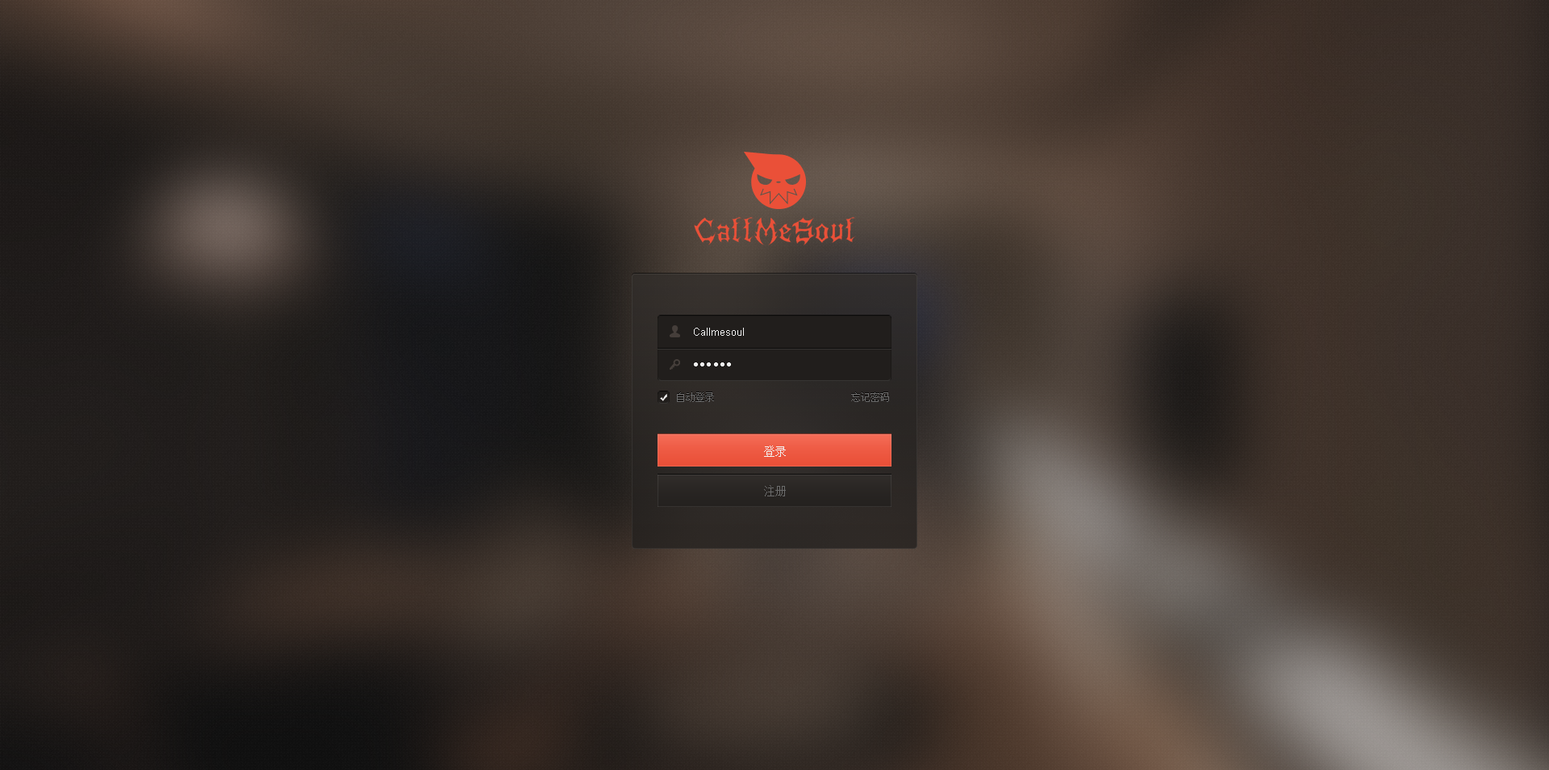
<style>
.page{position:relative;width:1549px;height:770px}
.page>*{position:absolute;margin:0}
.t1{font:10.7px "ArialMT";color:#f2f2f2}
.t2{font:9.7px "ArialMT";letter-spacing:0.1em;color:#f2f2f2}
.t3{font:9.7px "SimSun";color:#6b6b6b}
.t4{font:11.3px "SimSun";color:#f2f2f2}
.t5{font:11.3px "SimSun";color:#6b6b6b}
</style>
<div class="page">
<p class="t1" style="left:694px;top:328px;width:50px;height:8px">Callmesoul</p>
<p class="t2" style="left:694px;top:362px;width:37px;height:4px">●●●●●●</p>
<p class="t3" style="left:677px;top:392px;width:37px;height:10px">自动登录</p>
<p class="t3" style="left:851px;top:392px;width:38px;height:10px">忘记密码</p>
<p class="t4" style="left:764px;top:445px;width:22px;height:12px">登录</p>
<p class="t5" style="left:764px;top:485px;width:22px;height:11px">注册</p>
</div>
